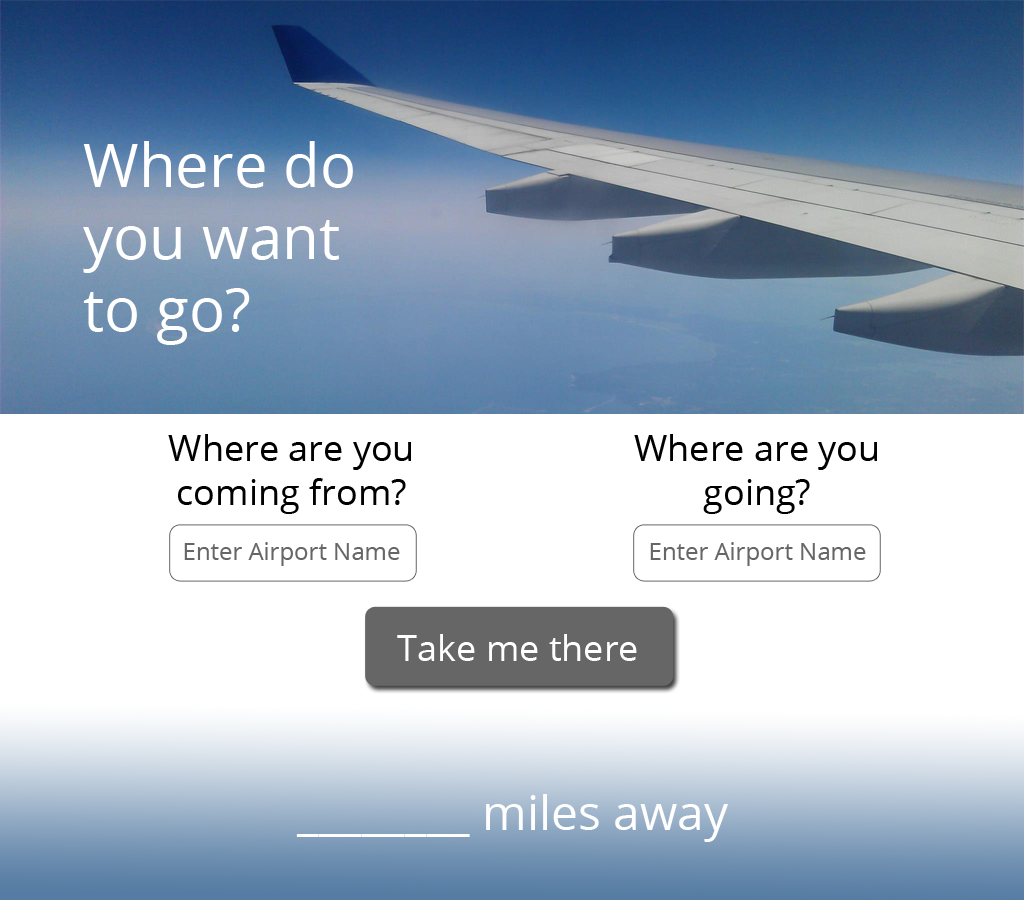
<style>
.page{position:relative;width:1024px;height:900px;background:#ffffff}
.page>*{position:absolute;margin:0}
.t1{font:60px "OpenSans";color:#ffffff}
.t2{font:36px "OpenSans";color:#000000}
.t3{font:24px "OpenSans";color:#666666}
.t4{font:36px "OpenSans";color:#ffffff}
.t5{font:48px "OpenSans";color:#fefeff}
</style>
<div class="page">
<p class="t1" style="left:83px;top:141px;width:270px;height:204px">Where do you want to go?</p>
<p class="t2" style="left:168px;top:434px;width:243px;height:80px;text-align:center">Where are you coming from?</p>
<p class="t2" style="left:634px;top:434px;width:243px;height:80px;text-align:center">Where are you going?</p>
<p class="t3" style="left:184px;top:542px;width:216px;height:24px">Enter Airport Name</p>
<p class="t3" style="left:650px;top:542px;width:216px;height:24px">Enter Airport Name</p>
<p class="t4" style="left:397px;top:634px;width:240px;height:27px">Take me there</p>
<p class="t5" style="left:296px;top:794px;width:432px;height:48px">________ miles away</p>
</div>
